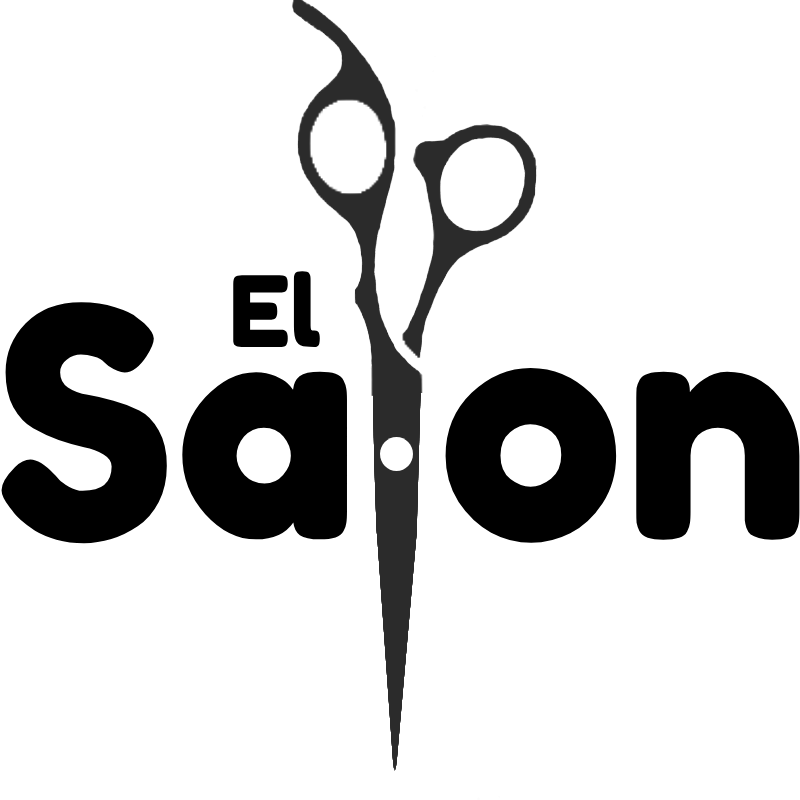
<style>
.page{position:relative;width:800px;height:800px;background:#ffffff}
.page>*{position:absolute;margin:0}
.t1{font:97.9px "FredokaOne-Regular";color:#000000}
.t2{font:319.1px "FredokaOne-Regular";color:#000000}
</style>
<div class="page">
<p class="t1" style="left:233px;top:271px;width:87px;height:76px">El</p>
<p class="t2" style="left:1px;top:302px;width:799px;height:242px">Sa on</p>
</div>
